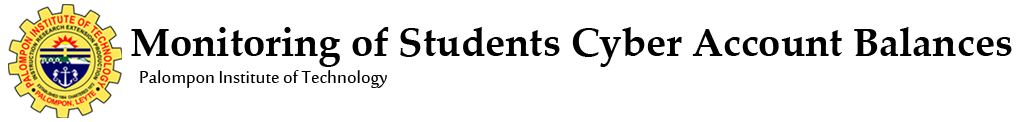
<style>
.page{position:relative;width:1017px;height:122px;background:#ffffff}
.page>*{position:absolute;margin:0}
.t1{font:40px "PalatinoLinotype-Bold";color:#000000}
.t2{font:24px "SakkalMajalla";color:#000000}
</style>
<div class="page">
<p class="t1" style="left:131px;top:27px;width:881px;height:40px">Monitoring of Students Cyber Account Balances</p>
<p class="t2" style="left:140px;top:70px;width:247px;height:18px">Palompon Institute of Technology</p>
</div>
